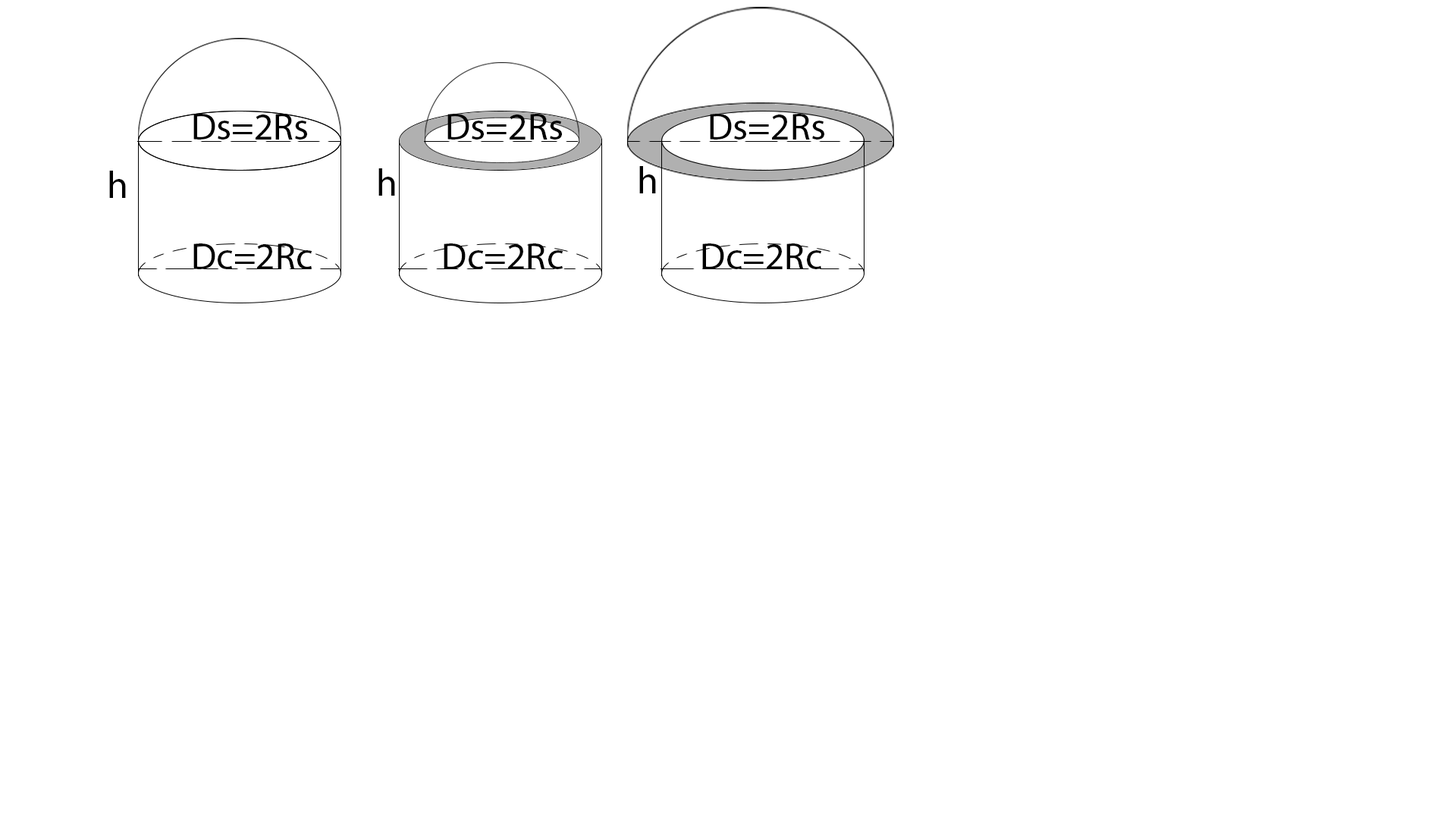
<style>
.page{position:relative;width:1456px;height:819px;background:#ffffff}
.page>*{position:absolute;margin:0}
.t1{font:9.1px "MyriadPro-Regular";color:#000000}
</style>
<div class="page">
<p class="t1" style="left:193px;top:114px;width:631px;height:26px">Ds=2Rs                 Ds=2Rs                  Ds=2Rs</p>
<p class="t1" style="left:109px;top:171px;width:17px;height:27px">h</p>
<p class="t1" style="left:378px;top:168px;width:17px;height:28px">h</p>
<p class="t1" style="left:639px;top:166px;width:17px;height:27px">h</p>
<p class="t1" style="left:193px;top:243px;width:628px;height:26px">Dc=2Rc                Dc=2Rc                 Dc=2Rc</p>
</div>
